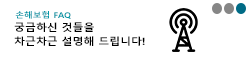
<style>
.page{position:relative;width:250px;height:60px;background:#ffffff}
.page>*{position:absolute;margin:0}
.t1{font:8px "MalgunGothicBold";letter-spacing:-0.005em;color:#0097a7;scale:1.1 1}
.t2{font:10px/14px "MalgunGothicBold";letter-spacing:-0.005em;color:#000000;scale:1.1 1}
</style>
<div class="page">
<p class="t1" style="left:15px;top:11px;width:56px;height:8px">손해보험 FAQ</p>
<p class="t2" style="left:14px;top:22px;width:131px;height:24px">궁금하신 것들을<br>차근차근 설명해 드립니다!</p>
</div>
